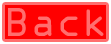
<style>
.page{position:relative;width:111px;height:44px;background:#ff0000}
.page>*{position:absolute;margin:0}
.t1{font:36px "OCRAStd";color:#ff6e6e}
</style>
<div class="page">
<p class="t1" style="left:8px;top:8px;width:96px;height:28px">Back</p>
</div>
